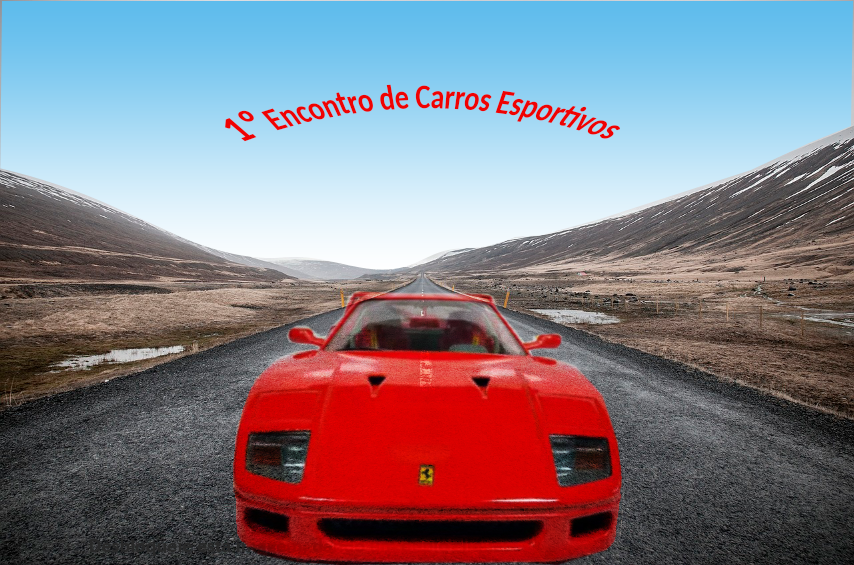
<style>
.page{position:relative;width:854px;height:565px}
.page>*{position:absolute;margin:0}
.t1{font:22.1px "Carlito-Bold";color:#ef0202}
.t2{font:27.6px "MyriadPro-It";color:#ef0202}
.t3{font:27.6px "Carlito-Bold";color:#ef0202}
</style>
<div class="page">
<p class="t1" style="left:225px;top:84px;width:395px;height:58px"><span class="t2">  </span><span class="t3">1º </span>Encontro de Carros Esportivos</p>
</div>
